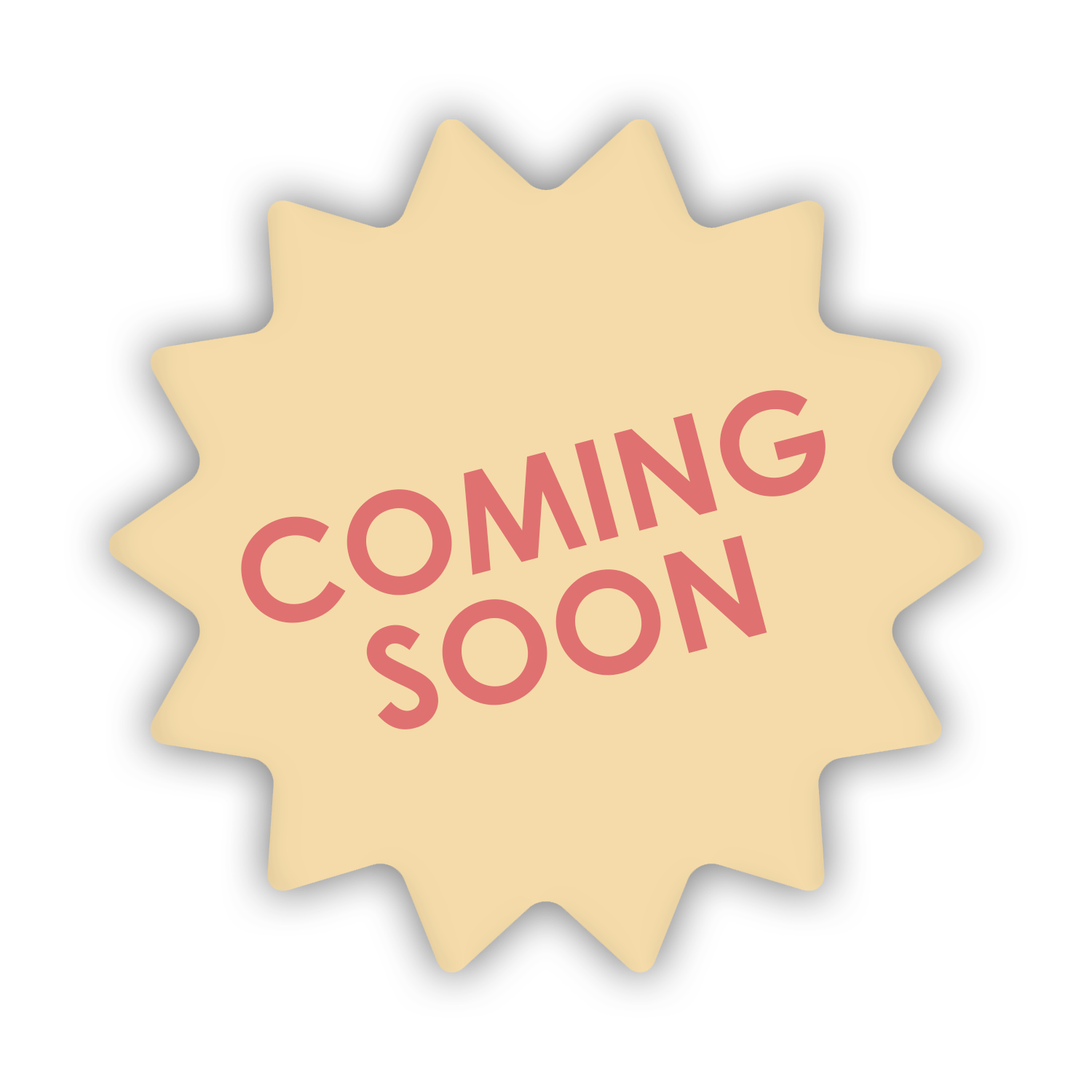
<style>
.page{position:relative;width:1092px;height:1092px;background:#ffffff}
.page>*{position:absolute;margin:0}
.t1{font:139.8px/131px "CenturyGothic-Bold";color:#e07171}
</style>
<div class="page">
<p class="t1" style="left:241px;top:390px;width:585px;height:339px;text-align:center;rotate:-15deg">COMING<br>SOON</p>
</div>
